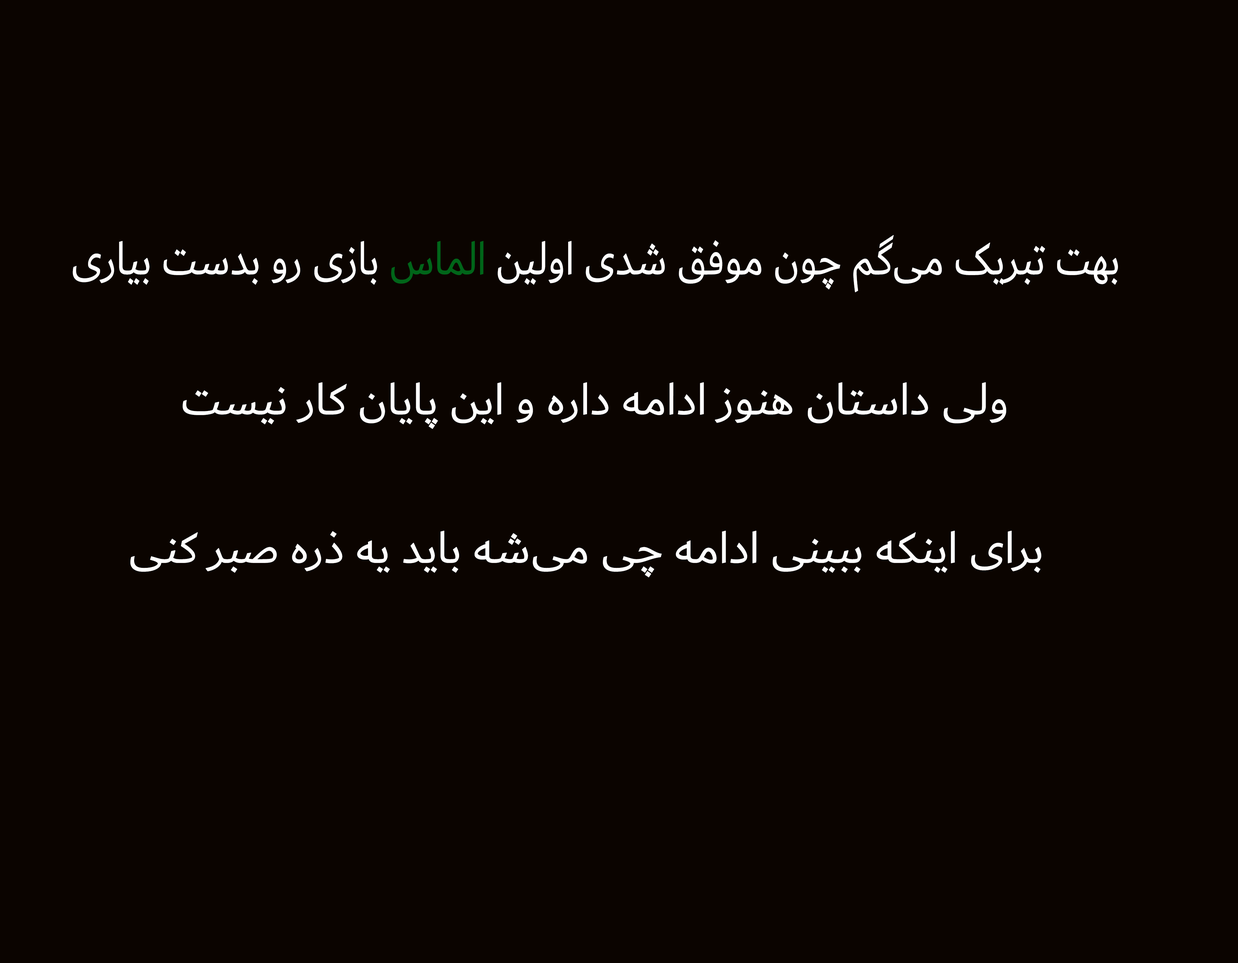
<style>
.page{position:relative;width:1238px;height:963px;background:#0b0400}
.page>*{position:absolute;margin:0}
.t1{font:49px "Dubai-Regular";color:#ffffff;scale:0.84 1}
.t2{font:49px "Dubai-Regular";color:#006519;scale:0.84 1}
.t3{font:47.1px "Dubai-Regular";color:#ffffff}
</style>
<div class="page">
<p class="t1" style="left:73px;top:235px;width:1045px;height:57px">بهت تبریک می‌گم چون موفق شدی اولین <span class="t2">الماس</span> بازی رو بدست بیاری</p>
<p class="t3" style="left:183px;top:382px;width:823px;height:47px">ولی داستان هنوز ادامه داره و این پایان کار نیست</p>
<p class="t3" style="left:130px;top:531px;width:911px;height:46px">برای اینکه ببینی ادامه چی می‌شه باید یه ذره صبر کنی</p>
</div>
